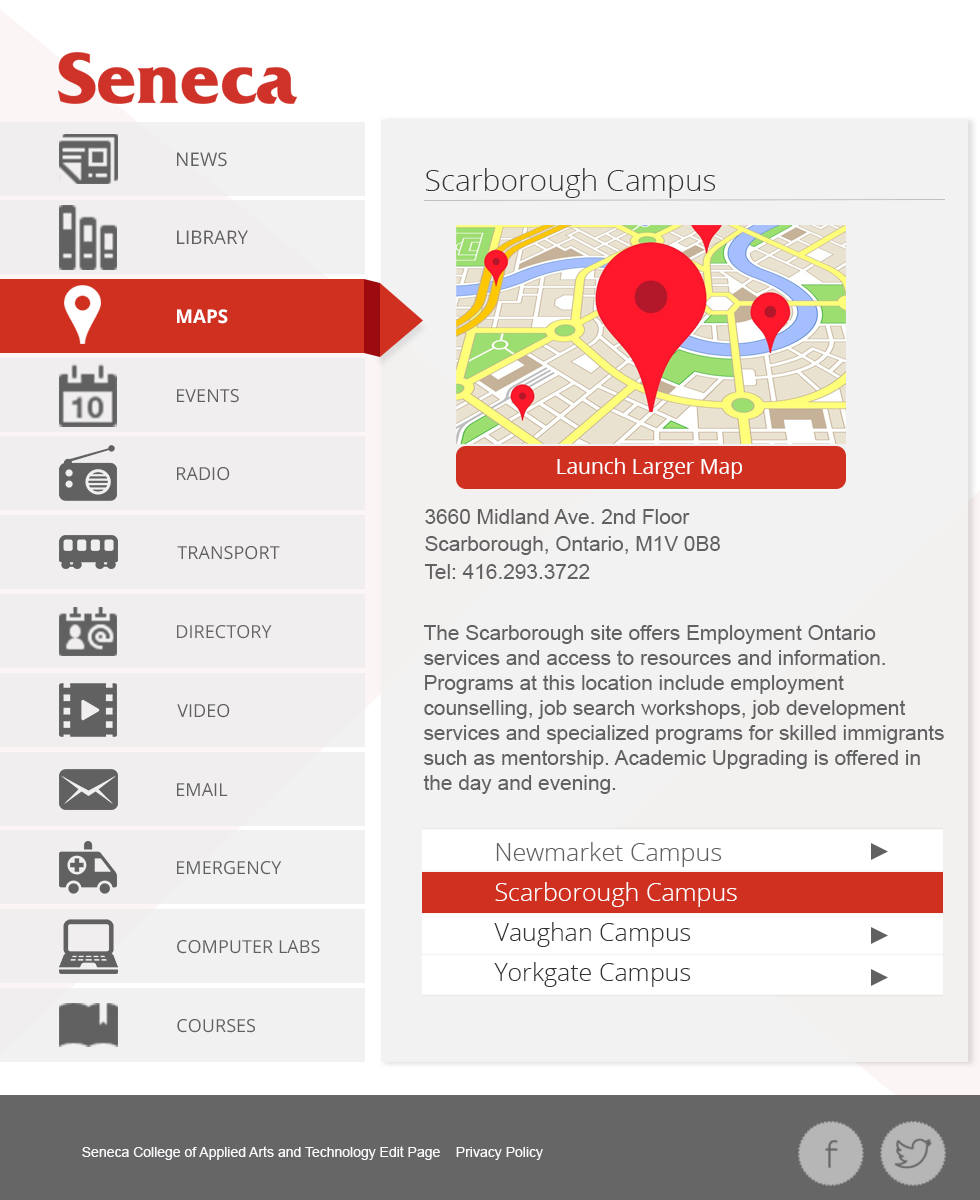
<style>
.page{position:relative;width:980px;height:1200px;background:#f3f2f2}
.page>*{position:absolute;margin:0}
.t1{font:30px "OpenSans-Light";color:#333333}
.t2{font:20.8px/25px "ArialMT";color:#616161}
.t3{font:25px/37.5px "OpenSans-Light";color:#333333}
.t4{font:25px/37.5px "OpenSans-Light";color:#616161}
.t5{font:25px/37.5px "OpenSans-Light";color:#ffffff}
</style>
<div class="page">
<p class="t1" style="left:426px;top:168px;width:290px;height:30px">Scarborough Campus</p>
<p class="t2" style="left:424px;top:509px;width:296px;height:70px">3660 Midland Ave. 2nd Floor<br>Scarborough, Ontario, M1V 0B8<br>Tel: 416.293.3722</p>
<p class="t2" style="left:423px;top:625px;width:521px;height:169px">The Scarborough site offers Employment Ontario services and access to resources and information. Programs at this location include employment counselling, job search workshops, job development services and specialized programs for skilled immigrants such as mentorship. Academic Upgrading is offered in the day and evening.</p>
<p class="t3" style="left:494px;top:842px;width:243px;height:145px"><span class="t4">Newmarket Campus<br></span><span class="t5">Scarborough Campus<br></span>Vaughan Campus<br>Yorkgate Campus</p>
</div>
